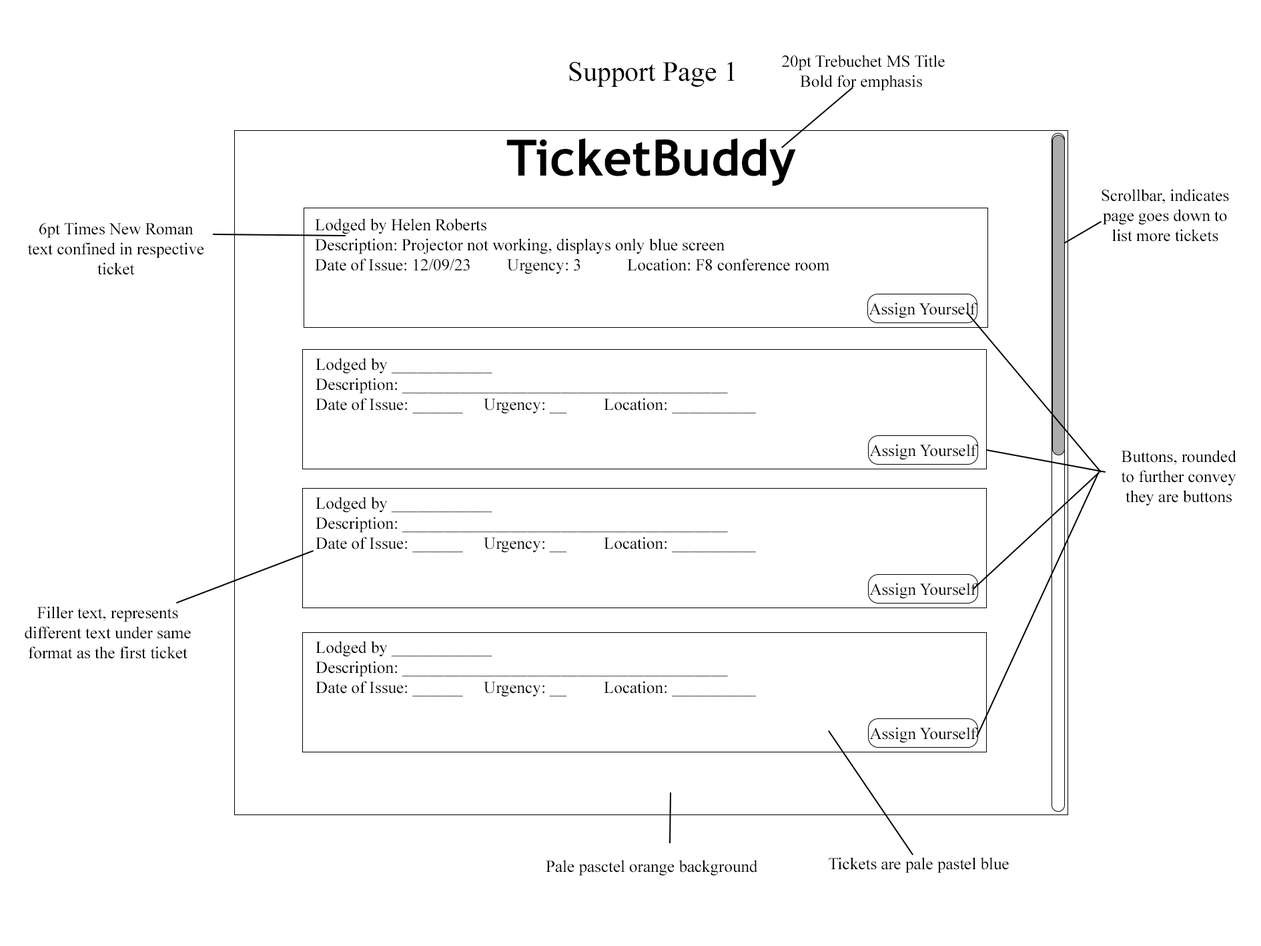
<style>
.page{position:relative;width:1261px;height:946px;background:#ffffff}
.page>*{position:absolute;margin:0}
.t1{font:27.8px "TimesNewRomanPSMT";color:#000000}
.t2{font:16.7px "TimesNewRomanPSMT";color:#000000}
.t3{font:50px "TrebuchetMS-Bold";color:#000000}
</style>
<div class="page">
<p class="t1" style="left:569px;top:61px;width:166px;height:26px">Support Page 1</p>
<p class="t2" style="left:782px;top:55px;width:163px;height:36px;text-align:center">20pt Trebuchet MS Title<br>Bold for emphasis</p>
<p class="t3" style="left:506px;top:138px;width:290px;height:48px">TicketBuddy</p>
<p class="t2" style="left:1102px;top:189px;width:127px;height:53px;text-align:center">Scrollbar, indicates<br>page goes down to<br>list more tickets</p>
<p class="t2" style="left:315px;top:218px;width:515px;height:56px">Lodged by Helen Roberts<br>Description: Projector not working, displays only blue screen<br>Date of Issue: 12/09/23  Urgency: 3  Location: F8 conference room</p>
<p class="t2" style="left:27px;top:222px;width:177px;height:53px;text-align:center">6pt Times New Roman<br>text confined in respective<br>ticket</p>
<p class="t2" style="left:869px;top:302px;width:109px;height:16px">Assign Yourself</p>
<p class="t2" style="left:316px;top:358px;width:440px;height:56px">Lodged by ____________<br>Description: _______________________________________<br>Date of Issue: ______ Urgency: __  Location: __________</p>
<p class="t2" style="left:869px;top:444px;width:109px;height:16px">Assign Yourself</p>
<p class="t2" style="left:1121px;top:450px;width:115px;height:56px;text-align:center">Buttons, rounded<br>to further convey<br>they are buttons</p>
<p class="t2" style="left:316px;top:496px;width:440px;height:56px">Lodged by ____________<br>Description: _______________________________________<br>Date of Issue: ______ Urgency: __  Location: __________</p>
<p class="t2" style="left:869px;top:583px;width:109px;height:16px">Assign Yourself</p>
<p class="t2" style="left:25px;top:606px;width:166px;height:53px;text-align:center">Filler text, represents<br>different text under same<br>format as the first ticket</p>
<p class="t2" style="left:316px;top:641px;width:440px;height:56px">Lodged by ____________<br>Description: _______________________________________<br>Date of Issue: ______ Urgency: __  Location: __________</p>
<p class="t2" style="left:869px;top:727px;width:109px;height:16px">Assign Yourself</p>
<p class="t2" style="left:829px;top:857px;width:180px;height:16px">Tickets are pale pastel blue</p>
<p class="t2" style="left:546px;top:859px;width:212px;height:16px">Pale pasctel orange background</p>
</div>
